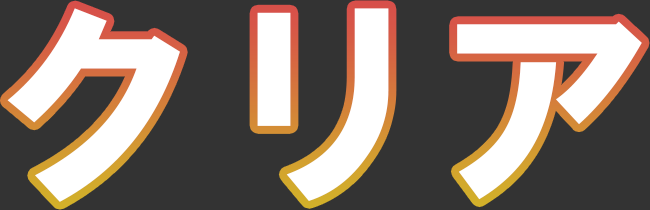
<style>
.page{position:relative;width:650px;height:210px;background:#333333}
.page>*{position:absolute;margin:0}
.t1{font:226.2px "HGSoeiKakugothicUB";color:#ffffff}
</style>
<div class="page">
<p class="t1" style="left:7px;top:8px;width:635px;height:194px">クリア</p>
</div>
